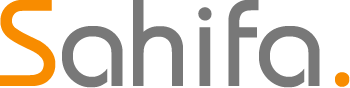
<style>
.page{position:relative;width:350px;height:88px;background:#ffffff}
.page>*{position:absolute;margin:0}
.t1{font:122.6px "BiminiNormal";color:#787878}
.t2{font:122.6px "BiminiNormal";color:#f88c00}
</style>
<div class="page">
<p class="t1" style="left:0px;top:0px;width:350px;height:88px"><span class="t2">S</span>ahifa<span class="t2">.</span></p>
</div>
